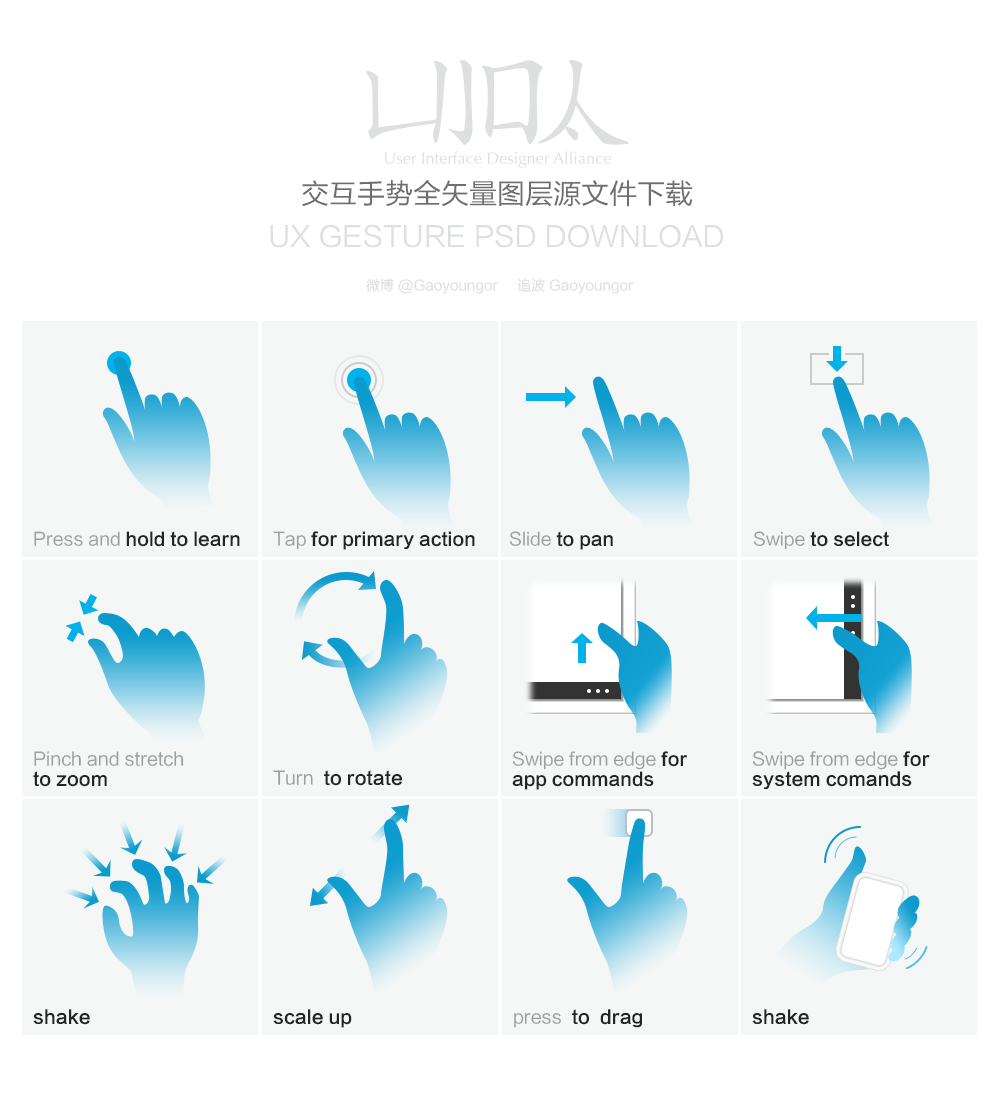
<style>
.page{position:relative;width:1000px;height:1100px;background:#f5f7f7}
.page>*{position:absolute;margin:0}
.t1{font:28px "FZLTHJW--GB1-0";color:#6d6e6e}
.t2{font:28px "FZLTHJW--GB1-0";color:#dee0e0;text-transform:uppercase}
.t3{font:14px "FZLTHJW--GB1-0";color:#dee0e0}
.t4{font:17.8px "FZLTCHJW--GB1-0";color:#232424}
.t5{font:17.8px "FZLTHJW--GB1-0";color:#9d9e9e}
.t6{font:18px/20px "FZLTHJW--GB1-0";color:#9d9e9e}
.t7{font:18px/20px "FZLTCHJW--GB1-0";color:#232424}
.t8{font:17.8px/20px "FZLTCHJW--GB1-0";color:#232424}
.t9{font:17.8px/20px "FZLTHJW--GB1-0";color:#9d9e9e}
.t10{font:18px "FZLTCHJW--GB1-0";color:#232424}
.t11{font:18px "FZLTHJW--GB1-0";color:#9d9e9e}
</style>
<div class="page">
<p class="t1" style="left:302px;top:180px;width:391px;height:27px">交互手势全矢量图层源文件下载</p>
<p class="t2" style="left:270px;top:224px;width:453px;height:24px">UX Gesture PSD DOWNLOAD</p>
<p class="t3" style="left:366px;top:278px;width:268px;height:16px">微博 @Gaoyoungor     追波 Gaoyoungor</p>
<p class="t4" style="left:34px;top:531px;width:206px;height:16px"><span class="t5">Press and </span>hold to learn</p>
<p class="t4" style="left:273px;top:531px;width:202px;height:19px"><span class="t5">Tap </span>for primary action</p>
<p class="t4" style="left:509px;top:531px;width:104px;height:19px"><span class="t5">Slide </span>to pan</p>
<p class="t4" style="left:753px;top:531px;width:136px;height:19px"><span class="t5">Swipe </span>to select</p>
<p class="t6" style="left:33px;top:751px;width:151px;height:36px">Pinch and stretch<br><span class="t7">to zoom</span></p>
<p class="t8" style="left:512px;top:751px;width:176px;height:39px"><span class="t9">Swipe from edge </span>for<br>app commands</p>
<p class="t7" style="left:752px;top:751px;width:178px;height:39px"><span class="t6">Swipe from edge </span>for <br>system comands</p>
<p class="t10" style="left:273px;top:770px;width:129px;height:16px"><span class="t11">Turn </span> to rotate</p>
<p class="t10" style="left:33px;top:1009px;width:57px;height:16px">shake</p>
<p class="t10" style="left:273px;top:1009px;width:79px;height:19px">scale up</p>
<p class="t10" style="left:514px;top:1009px;width:128px;height:19px"><span class="t11">press </span> to  drag</p>
<p class="t10" style="left:752px;top:1009px;width:57px;height:16px">shake</p>
</div>
